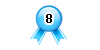
<style>
.page{position:relative;width:100px;height:50px;background:#ffffff}
.page>*{position:absolute;margin:0}
.t1{font:12px "Dotum";color:#000000;font-weight:bold}
</style>
<div class="page">
<p class="t1" style="left:46px;top:14px;width:6px;height:9px">8</p>
</div>
